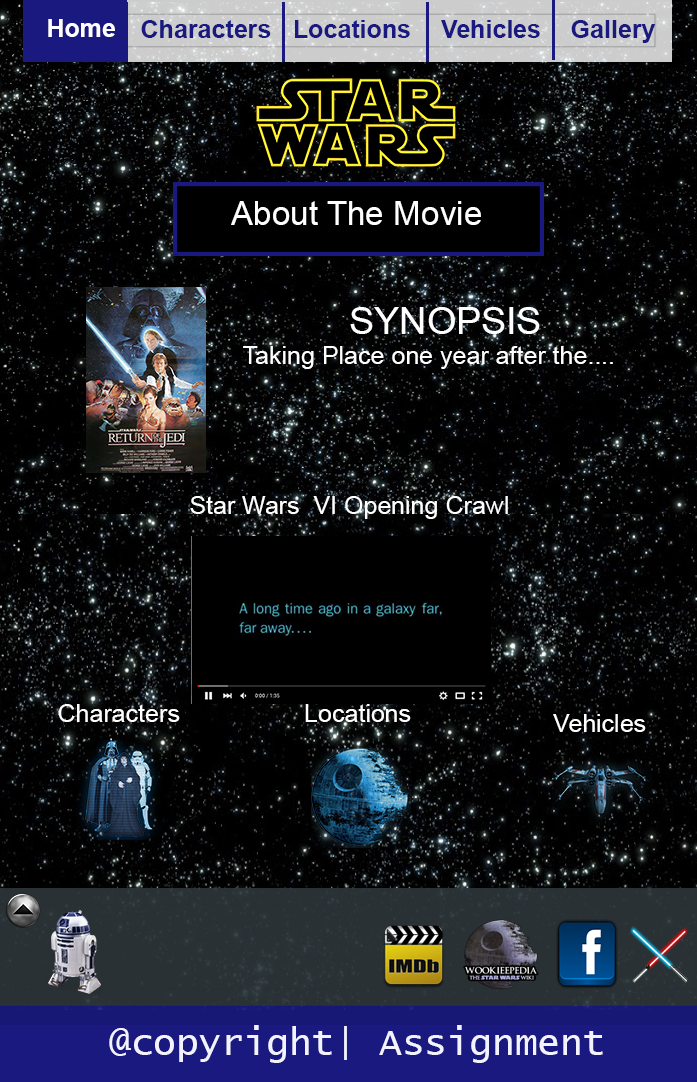
<style>
.page{position:relative;width:697px;height:1082px}
.page>*{position:absolute;margin:0}
.t1{font:25px "Arial-BoldMT";color:#ffffff}
.t2{font:25px "Arial-BoldMT";color:#191980}
.t3{font:33.3px "ArialMT";color:#ffffff}
.t4{font:25px "ArialMT";color:#ffffff}
.t5{font:37.5px "ArialMT";color:#ffffff}
.t6{font:37.5px "LucidaConsole";color:#f3f3ff}
</style>
<div class="page">
<p class="t1" style="left:48px;top:19px;width:67px;height:18px">Home</p>
<p class="t2" style="left:141px;top:20px;width:130px;height:18px">Characters</p>
<p class="t2" style="left:295px;top:20px;width:115px;height:18px">Locations</p>
<p class="t2" style="left:441px;top:20px;width:99px;height:18px">Vehicles</p>
<p class="t2" style="left:571px;top:20px;width:85px;height:23px">Gallery</p>
<p class="t3" style="left:231px;top:201px;width:250px;height:24px">About The Movie</p>
<p class="t4" style="left:243px;top:307px;width:370px;height:62px;text-align:center"><span class="t5">SYNOPSIS<br></span>Taking Place one year after the....</p>
<p class="t4" style="left:190px;top:496px;width:318px;height:23px">Star Wars  VI Opening Crawl</p>
<p class="t4" style="left:58px;top:704px;width:122px;height:18px">Characters</p>
<p class="t4" style="left:305px;top:704px;width:106px;height:18px">Locations</p>
<p class="t4" style="left:553px;top:714px;width:93px;height:18px">Vehicles</p>
<p class="t6" style="left:109px;top:1025px;width:494px;height:38px">@copyright| Assignment</p>
</div>
